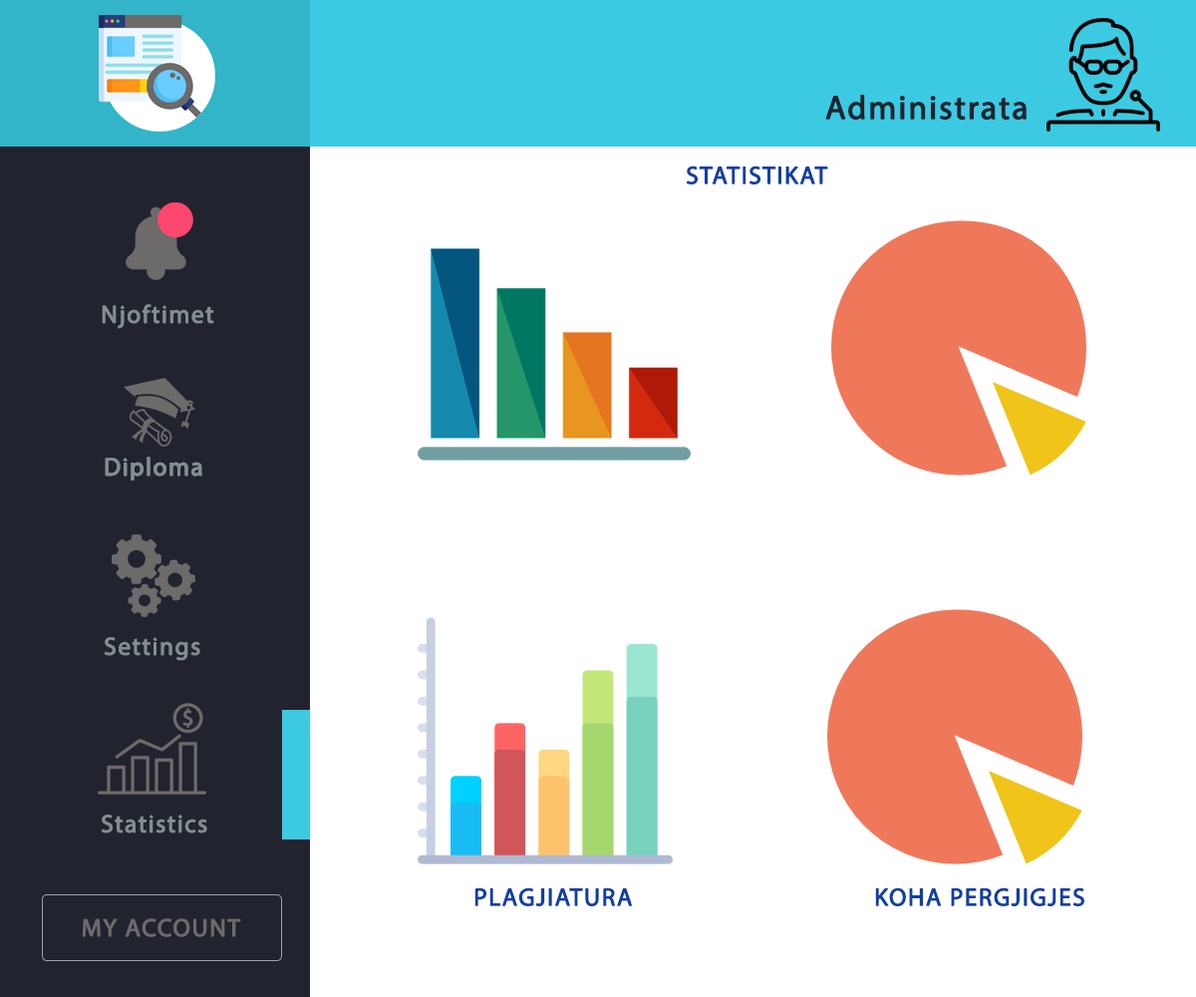
<style>
.page{position:relative;width:1196px;height:997px;background:#ffffff}
.page>*{position:absolute;margin:0}
.t1{font:33.2px "MyriadPro-Regular";letter-spacing:0.04em;color:#21232f;font-weight:bold}
.t2{font:24.9px "MyriadPro-Regular";letter-spacing:0.04em;color:#0d3fa6;font-weight:bold}
.t3{font:24.9px "MyriadPro-Regular";letter-spacing:0.04em;color:#828e90;font-weight:bold}
.t4{font:24.9px "MyriadPro-Regular";letter-spacing:0.04em;color:#6d6a6a;font-weight:bold}
</style>
<div class="page">
<p class="t1" style="left:825px;top:95px;width:202px;height:25px">Administrata</p>
<p class="t2" style="left:686px;top:165px;width:142px;height:19px">STATISTIKAT</p>
<p class="t3" style="left:102px;top:304px;width:112px;height:25px">Njoftimet</p>
<p class="t3" style="left:105px;top:457px;width:97px;height:23px">Diploma</p>
<p class="t3" style="left:105px;top:457px;width:97px;height:23px">Diploma</p>
<p class="t3" style="left:104px;top:637px;width:96px;height:24px">Settings</p>
<p class="t3" style="left:101px;top:814px;width:106px;height:19px">Statistics</p>
<p class="t2" style="left:474px;top:887px;width:159px;height:19px">PLAGJIATURA</p>
<p class="t2" style="left:875px;top:887px;width:210px;height:19px">KOHA PERGJIGJES</p>
<p class="t4" style="left:82px;top:918px;width:159px;height:19px">MY ACCOUNT</p>
</div>
